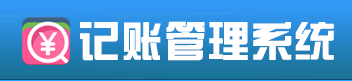
<style>
.page{position:relative;width:352px;height:81px}
.page>*{position:absolute;margin:0}
.t1{font:42px "FZZYJW--GB1-0";color:#ffffff;font-weight:bold}
</style>
<div class="page">
<p class="t1" style="left:80px;top:21px;width:254px;height:40px">记账管理系统</p>
</div>
